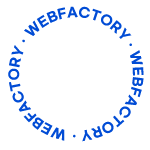
<style>
.page{position:relative;width:150px;height:150px;background:#ffffff}
.page>*{position:absolute;margin:0}
.t1{font:13px/97.2px "GmarketSansTTFBold";color:#014cd5;text-transform:uppercase}
</style>
<div class="page">
<p class="t1" style="left:8px;top:6px;width:136px;height:136px;text-align:center">webfactoryㆍwebfactoryㆍwebfactoryㆍ</p>
</div>
